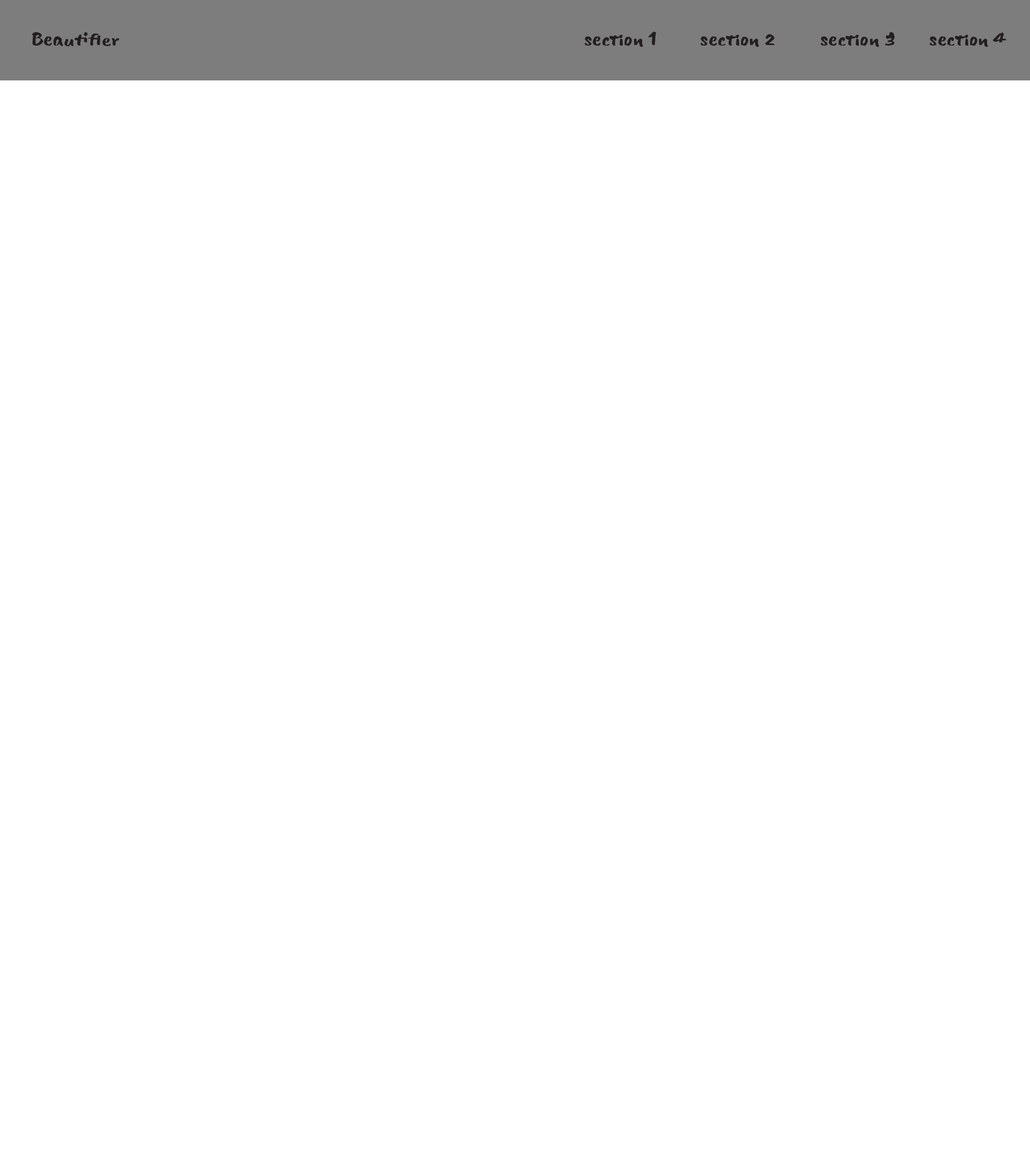
<style>
.page{position:relative;width:1030px;height:1158px;background:#ffffff}
.page>*{position:absolute;margin:0}
.t1{font:20.6px "CaveatBrush-Regular";letter-spacing:-0.02em;color:#231f20;scale:1.25 1}
</style>
<div class="page">
<p class="t1" style="left:32px;top:32px;width:87px;height:15px">Beautifier</p>
<p class="t1" style="left:584px;top:32px;width:72px;height:15px">section 1</p>
<p class="t1" style="left:700px;top:34px;width:74px;height:13px">section 2</p>
<p class="t1" style="left:820px;top:32px;width:74px;height:15px">section 3</p>
<p class="t1" style="left:929px;top:32px;width:77px;height:15px">section 4</p>
</div>
